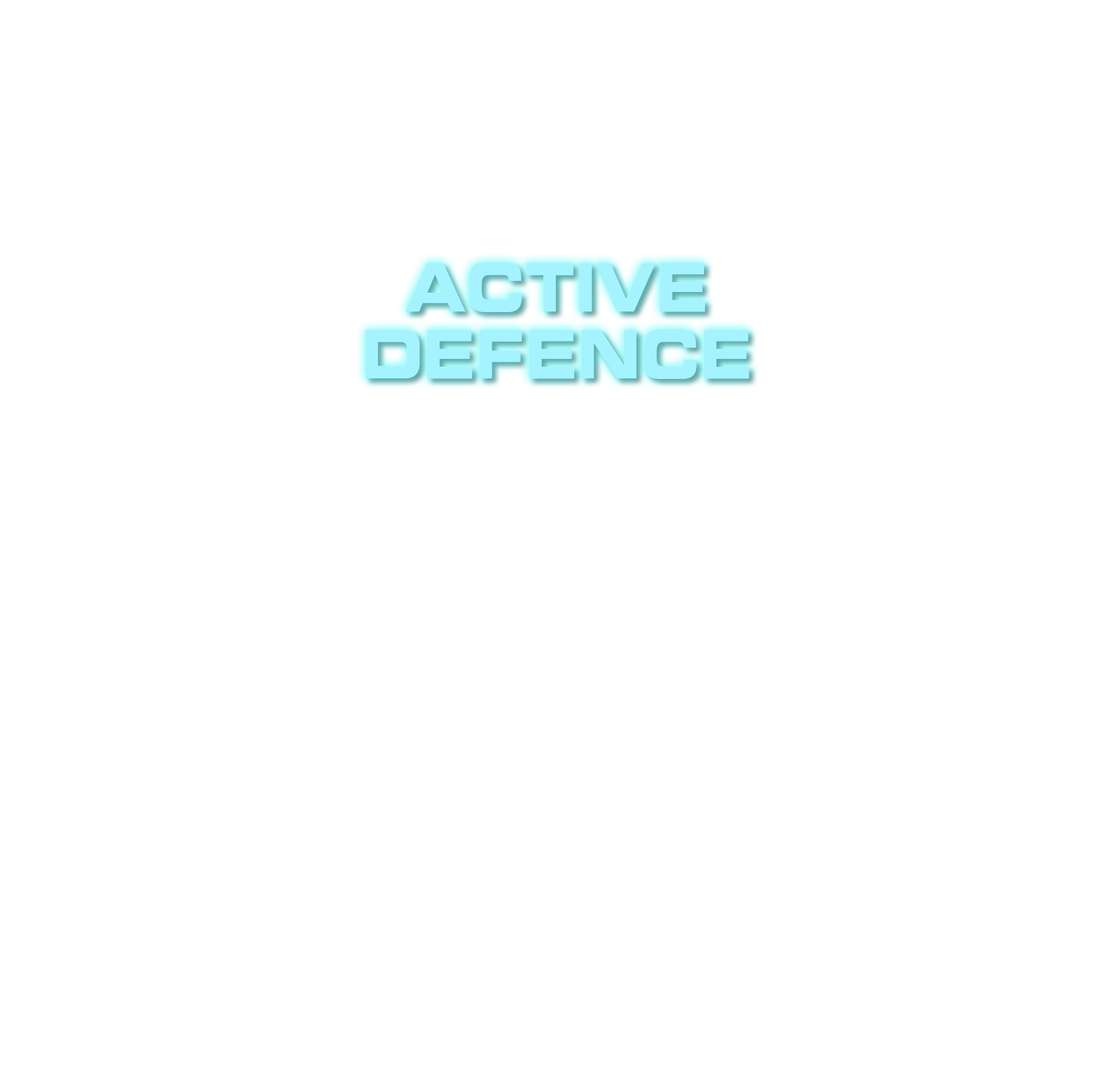
<style>
.page{position:relative;width:1115px;height:1070px;background:#ffffff}
.page>*{position:absolute;margin:0}
.t1{font:66.9px "EurostileLTStd-BoldEx2";color:#a5f3ff;scale:0.83 1}
</style>
<div class="page">
<p class="t1" style="left:365px;top:262px;width:384px;height:117px;text-align:center">ACTIVE<br>DEFENCE</p>
</div>
